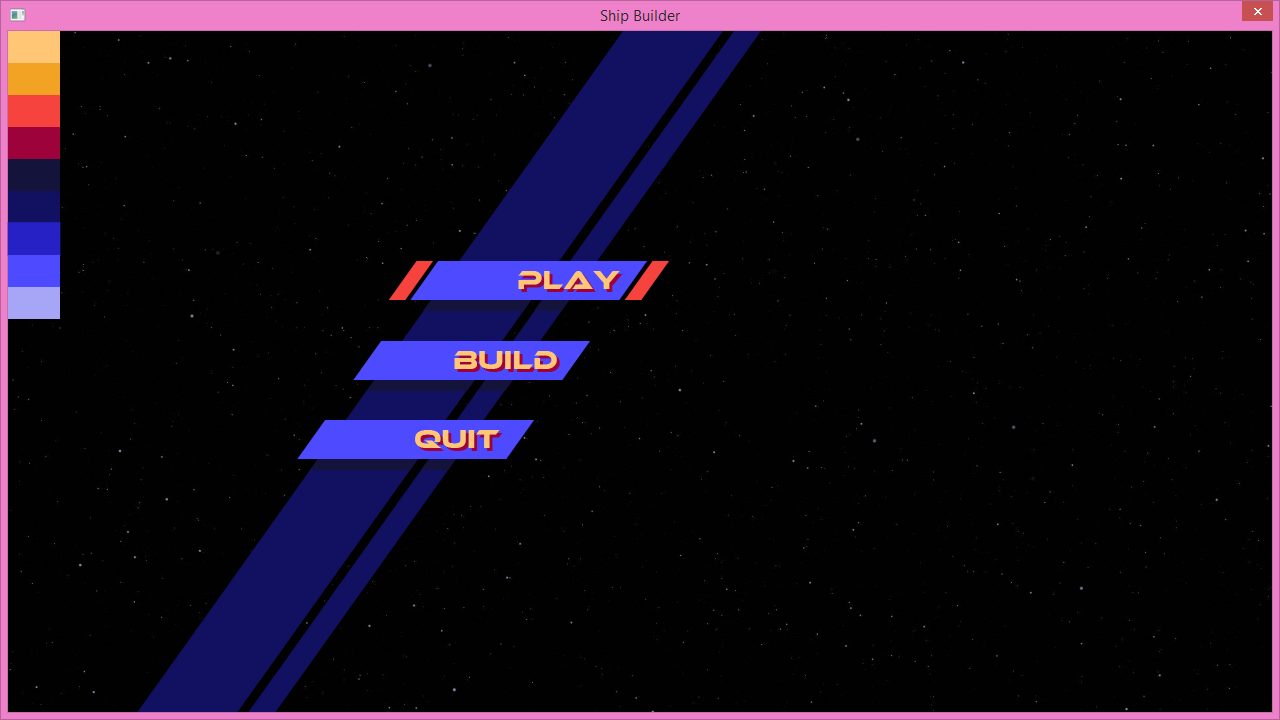
<style>
.page{position:relative;width:1280px;height:720px;background:#010101}
.page>*{position:absolute;margin:0}
.t1{font:26px "EthnocentricRg-Regular";color:#ffc675}
</style>
<div class="page">
<p class="t1" style="left:518px;top:271px;width:102px;height:18px">Play</p>
<p class="t1" style="left:454px;top:351px;width:103px;height:18px">Build</p>
<p class="t1" style="left:415px;top:430px;width:85px;height:18px">Quit</p>
</div>
